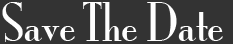
<style>
.page{position:relative;width:233px;height:44px;background:#333333}
.page>*{position:absolute;margin:0}
.t1{font:48px "MonaLisaSolidITCTT";color:#fefefe}
</style>
<div class="page">
<p class="t1" style="left:2px;top:2px;width:221px;height:40px">Save The Date</p>
</div>
